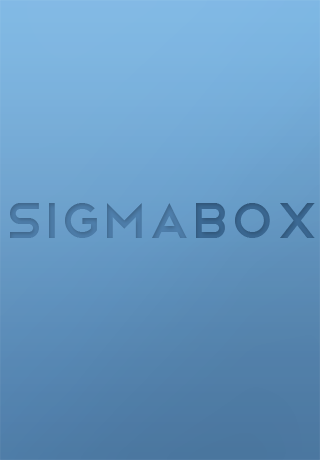
<style>
.page{position:relative;width:320px;height:460px}
.page>*{position:absolute;margin:0}
.t1{font:65.1px "Telegrafico";color:#4f80ad}
.t2{font:65.1px "Telegrafico";color:#3c6a95}
</style>
<div class="page">
<p class="t1" style="left:10px;top:203px;width:305px;height:35px">Sigma<span class="t2">box</span></p>
</div>
